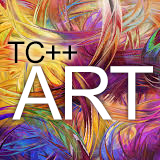
<style>
.page{position:relative;width:160px;height:160px}
.page>*{position:absolute;margin:0}
.t1{font:30px "ArialMT";letter-spacing:-0.04em;color:#000000}
.t2{font:74.3px "ArialMT";letter-spacing:-0.04em;color:#ffffff}
</style>
<div class="page">
<p class="t1" style="left:7px;top:41px;width:70px;height:23px">TC++</p>
<p class="t2" style="left:12px;top:66px;width:141px;height:54px">ART</p>
</div>
